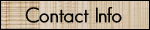
<style>
.page{position:relative;width:150px;height:30px}
.page>*{position:absolute;margin:0}
.t1{font:20px "GeosansLight";color:#000000;font-weight:bold}
</style>
<div class="page">
<p class="t1" style="left:25px;top:7px;width:97px;height:16px">Contact Info</p>
</div>
